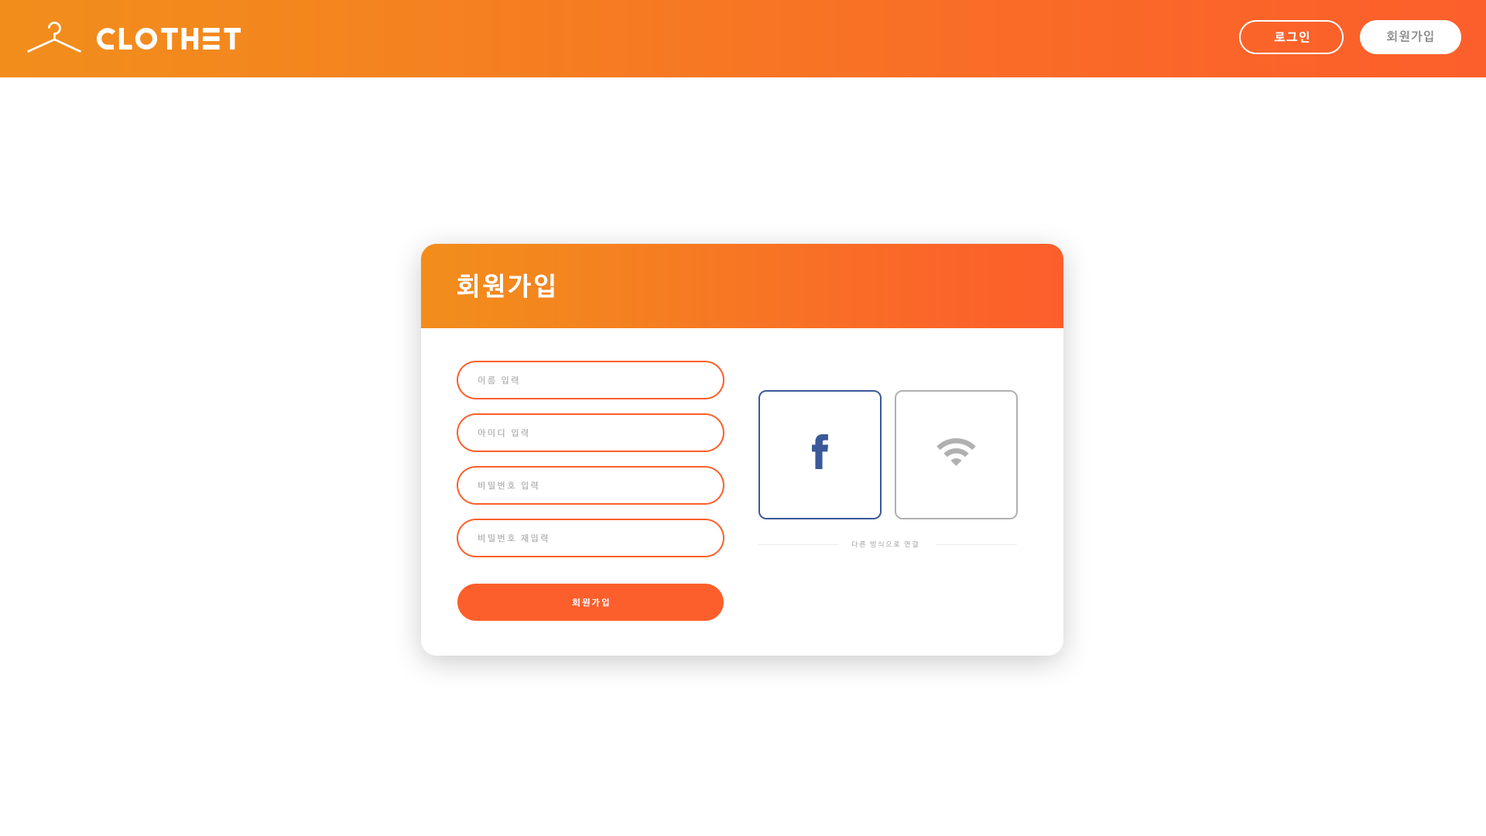
<style>
.page{position:relative;width:1486px;height:836px;background:#ffffff}
.page>*{position:absolute;margin:0}
.t1{font:12.4px "NanumBarunGothicBold";letter-spacing:0.1em;color:#ffffff}
.t2{font:12.4px "NanumBarunGothicBold";letter-spacing:0.1em;color:#8d8d8d}
.t3{font:25.8px "NanumBarunGothicBold";letter-spacing:0.1em;color:#ffffff}
.t4{font:9px "NanumBarunGothicBold";letter-spacing:0.2em;color:#b8b8b8}
.t5{font:7.1px "NanumBarunGothic";letter-spacing:0.2em}
.t6{font:9px "NanumBarunGothicBold";letter-spacing:0.2em;color:#ffffff}
</style>
<div class="page">
<p class="t1" style="left:1274px;top:31px;width:36px;height:12px">로그인</p>
<p class="t2" style="left:1387px;top:30px;width:47px;height:13px">회원가입</p>
<p class="t3" style="left:457px;top:273px;width:97px;height:25px">회원가입</p>
<p class="t4" style="left:478px;top:376px;width:41px;height:9px">이름 입력</p>
<p class="t4" style="left:478px;top:429px;width:50px;height:8px">아이디 입력</p>
<p class="t4" style="left:478px;top:481px;width:60px;height:9px">비밀번호 입력</p>
<p class="t4" style="left:478px;top:534px;width:70px;height:9px">비밀번호 재입력</p>
<p class="t5" style="left:852px;top:540px;width:66px;height:8px">다른 방식으로 연결</p>
<p class="t6" style="left:572px;top:598px;width:37px;height:9px">회원가입</p>
</div>
